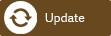
<style>
.page{position:relative;width:111px;height:36px;background:#68481f}
.page>*{position:absolute;margin:0}
.t1{font:12px "EuphemiaCAS";color:#ffffff}
</style>
<div class="page">
<p class="t1" style="left:45px;top:13px;width:40px;height:12px">Update</p>
</div>
